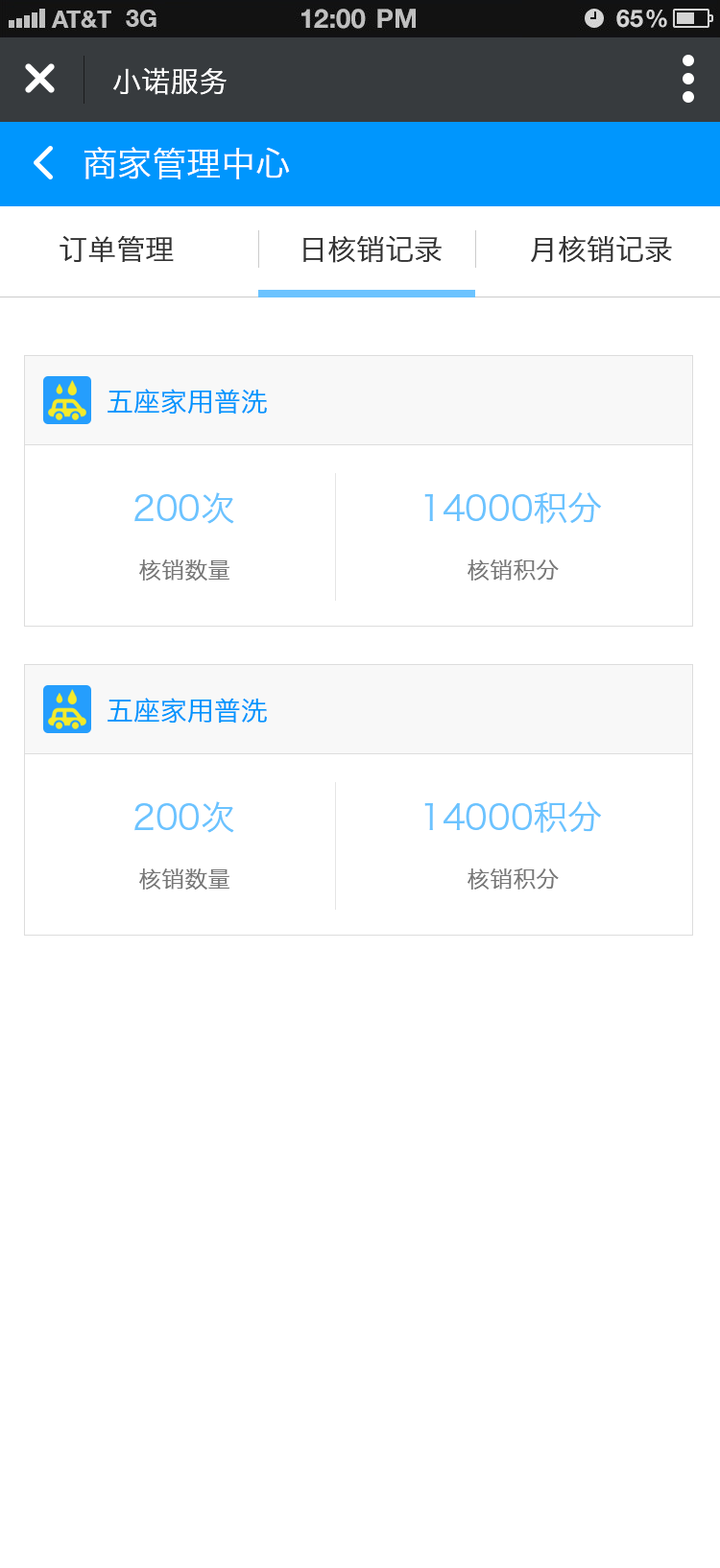
<style>
.page{position:relative;width:720px;height:1568px;background:#ffffff}
.page>*{position:absolute;margin:0}
.t1{font:28.8px "HiraginoSansGB-W3";color:#ffffff}
.t2{font:34.5px "HiraginoSansGB-W3";color:#ffffff}
.t3{font:28.8px "HiraginoSansGB-W3";color:#333333}
.t4{font:26.9px "HiraginoSansGB-W3";color:#0096fd}
.t5{font:34.5px "HiraginoSansGB-W3";color:#6bc3ff}
.t6{font:23px "HiraginoSansGB-W3";color:#777777}
</style>
<div class="page">
<p class="t1" style="left:113px;top:67px;width:113px;height:28px">小诺服务</p>
<p class="t2" style="left:84px;top:147px;width:206px;height:32px">商家管理中心</p>
<p class="t3" style="left:59px;top:235px;width:613px;height:28px">订单管理             日核销记录         月核销记录</p>
<p class="t4" style="left:107px;top:389px;width:160px;height:26px">五座家用普洗</p>
<p class="t5" style="left:134px;top:492px;width:100px;height:32px">200次</p>
<p class="t5" style="left:424px;top:492px;width:178px;height:32px">14000积分</p>
<p class="t6" style="left:139px;top:559px;width:90px;height:22px">核销数量</p>
<p class="t6" style="left:467px;top:558px;width:91px;height:23px">核销积分</p>
<p class="t4" style="left:107px;top:698px;width:160px;height:26px">五座家用普洗</p>
<p class="t5" style="left:134px;top:801px;width:100px;height:32px">200次</p>
<p class="t5" style="left:424px;top:801px;width:178px;height:32px">14000积分</p>
<p class="t6" style="left:139px;top:868px;width:90px;height:22px">核销数量</p>
<p class="t6" style="left:467px;top:867px;width:91px;height:23px">核销积分</p>
</div>
